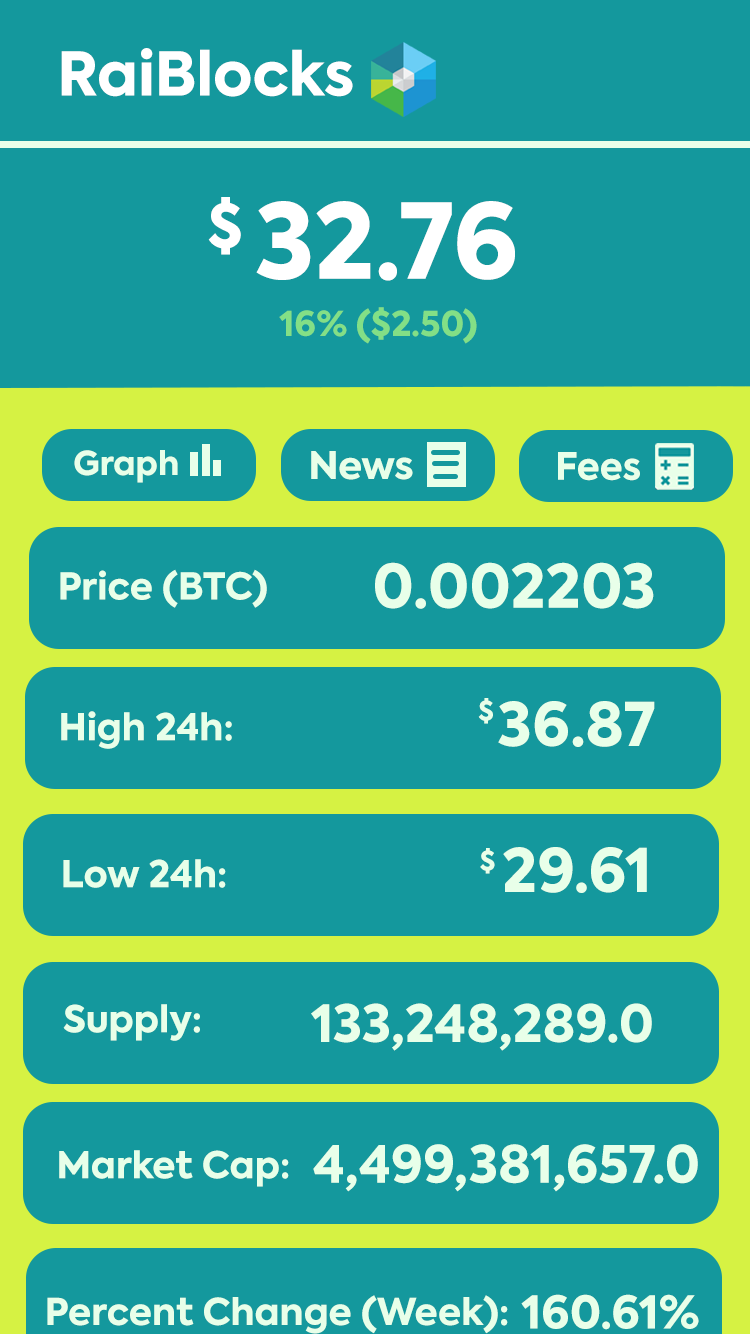
<style>
.page{position:relative;width:750px;height:1334px;background:#14989d}
.page>*{position:absolute;margin:0}
.t1{font:60px "Axiforma-ExtraBold";color:#ffffff}
.t2{font:103px "Axiforma-ExtraBold";color:#ffffff}
.t3{font:34.3px "Axiforma-ExtraBold";color:#83df86}
.t4{font:34.3px "Axiforma-ExtraBold";color:#5ccc5a}
.t5{font:32.7px "Axiforma-ExtraBold";color:#e8ffe9}
.t6{font:37.9px "Axiforma-ExtraBold";color:#e8ffe9}
.t7{font:37.5px "Axiforma-ExtraBold";color:#e8ffe9;scale:0.97 1}
.t8{font:36.8px "Axiforma-ExtraBold";color:#e8ffe9}
.t9{font:60px "Axiforma-ExtraBold";color:#e8ffe9}
.t10{font:26.6px "Axiforma-ExtraBold";color:#e8ffe9}
.t11{font:36.9px "Axiforma-ExtraBold";color:#e8ffe9}
.t12{font:51px "Axiforma-ExtraBold";color:#e8ffe9}
.t13{font:45px "Axiforma-ExtraBold";color:#e8ffe9}
</style>
<div class="page">
<p class="t1" style="left:61px;top:48px;width:292px;height:49px">RaiBlocks</p>
<p class="t1" style="left:208px;top:197px;width:33px;height:58px">$</p>
<p class="t2" style="left:256px;top:201px;width:259px;height:80px">32.76</p>
<p class="t3" style="left:279px;top:307px;width:198px;height:37px"><span class="t4"> </span>16% ($2.50)</p>
<p class="t5" style="left:74px;top:450px;width:104px;height:33px">Graph</p>
<p class="t6" style="left:311px;top:451px;width:102px;height:29px">News</p>
<p class="t7" style="left:558px;top:452px;width:82px;height:29px">Fees</p>
<p class="t8" style="left:60px;top:569px;width:207px;height:39px">Price (BTC)</p>
<p class="t9" style="left:375px;top:562px;width:279px;height:47px">0.002203</p>
<p class="t10" style="left:478px;top:698px;width:15px;height:26px">$</p>
<p class="t9" style="left:498px;top:701px;width:157px;height:46px">36.87</p>
<p class="t8" style="left:61px;top:711px;width:171px;height:38px">High 24h:</p>
<p class="t10" style="left:480px;top:848px;width:15px;height:26px">$</p>
<p class="t9" style="left:503px;top:847px;width:144px;height:46px">29.61</p>
<p class="t8" style="left:63px;top:859px;width:163px;height:29px">Low 24h:</p>
<p class="t11" style="left:63px;top:1004px;width:137px;height:37px">Supply:</p>
<p class="t12" style="left:311px;top:1003px;width:341px;height:48px">133,248,289.0</p>
<p class="t12" style="left:313px;top:1144px;width:385px;height:48px">4,499,381,657.0</p>
<p class="t11" style="left:59px;top:1150px;width:230px;height:37px">Market Cap:</p>
<p class="t11" style="left:47px;top:1295px;width:461px;height:39px">Percent Change (Week):</p>
<p class="t13" style="left:521px;top:1294px;width:178px;height:36px">160.61%</p>
</div>
